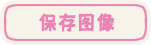
<style>
.page{position:relative;width:151px;height:45px;background:#f7f3e9}
.page>*{position:absolute;margin:0}
.t1{font:12px "shetumodengxiaofangti";color:#eb84b4;font-weight:bold;scale:0.94 1}
</style>
<div class="page">
<p class="t1" style="left:39px;top:13px;width:76px;height:19px">保存图像</p>
</div>
